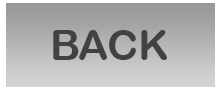
<style>
.page{position:relative;width:220px;height:90px}
.page>*{position:absolute;margin:0}
.t1{font:41.7px "ArialRoundedMTBold";color:#424242}
</style>
<div class="page">
<p class="t1" style="left:53px;top:30px;width:114px;height:30px">BACK</p>
</div>
